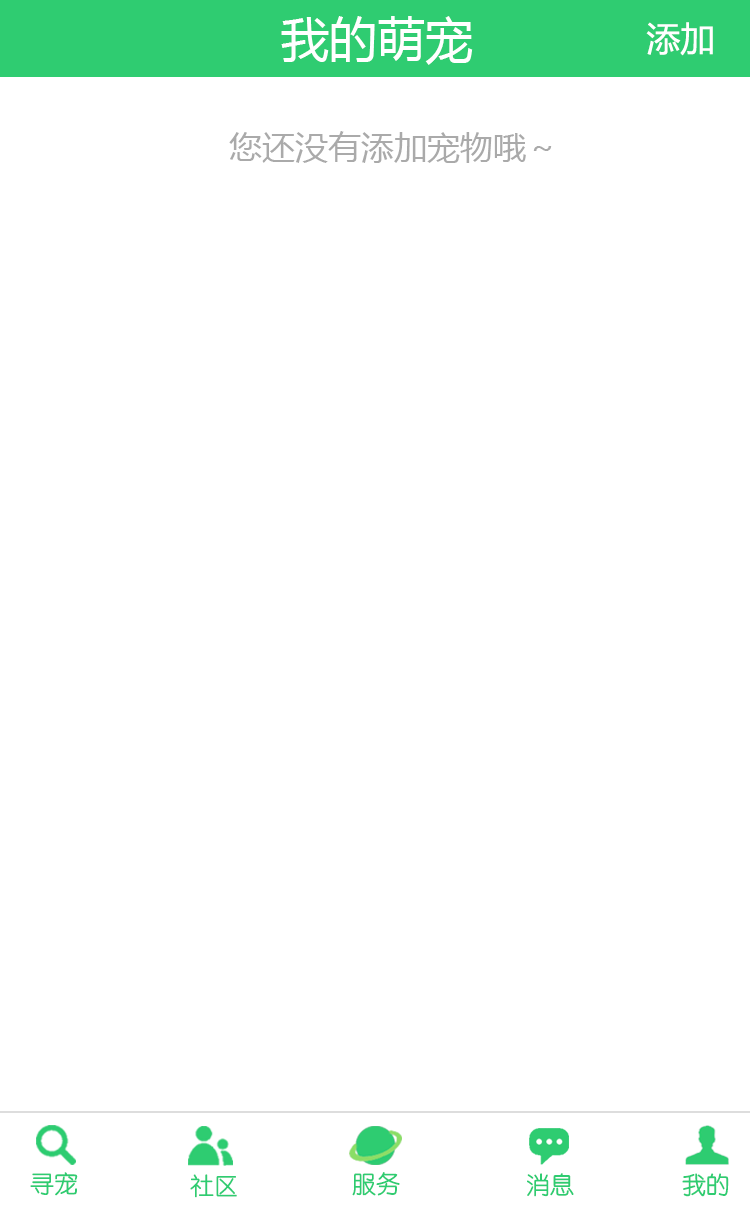
<style>
.page{position:relative;width:750px;height:1206px;background:#ffffff}
.page>*{position:absolute;margin:0}
.t1{font:48px "MicrosoftYaHei";color:#ffffff}
.t2{font:34px "MicrosoftYaHei";color:#ffffff}
.t3{font:33px "MicrosoftYaHei";color:#aaaaaa}
.t4{font:24px "STYuanti-SC-Regular";color:#2ecc71}
.t5{font:24px "STYuanti-SC-Regular"}
</style>
<div class="page">
<p class="t1" style="left:281px;top:16px;width:192px;height:49px">我的萌宠</p>
<p class="t2" style="left:646px;top:22px;width:67px;height:34px">添加</p>
<p class="t3" style="left:229px;top:131px;width:323px;height:32px">您还没有添加宠物哦～</p>
<p class="t4" style="left:30px;top:1172px;width:48px;height:24px">寻宠</p>
<p class="t4" style="left:190px;top:1174px;width:47px;height:24px">社区</p>
<p class="t5" style="left:352px;top:1173px;width:48px;height:24px">服务</p>
<p class="t4" style="left:352px;top:1172px;width:48px;height:24px">服务</p>
<p class="t5" style="left:526px;top:1173px;width:47px;height:24px">消息</p>
<p class="t4" style="left:527px;top:1173px;width:47px;height:24px">消息</p>
<p class="t4" style="left:682px;top:1173px;width:47px;height:24px">我的</p>
<p class="t4" style="left:682px;top:1173px;width:47px;height:24px">我的</p>
</div>
